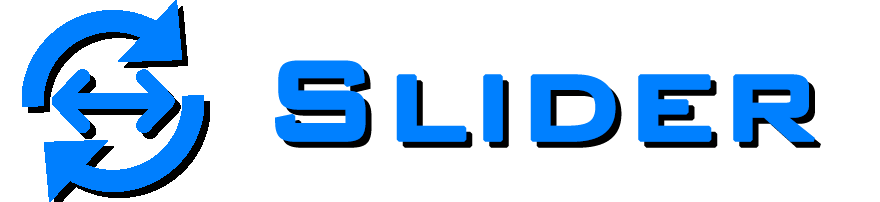
<style>
.page{position:relative;width:880px;height:202px;background:#ffffff}
.page>*{position:absolute;margin:0}
.t1{font:149.3px "BankGothicBT-Medium";color:#0080ff;font-weight:bold}
</style>
<div class="page">
<p class="t1" style="left:275px;top:60px;width:540px;height:82px">Slider</p>
</div>
